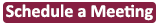
<style>
.page{position:relative;width:159px;height:25px;background:#861f41}
.page>*{position:absolute;margin:0}
.t1{font:18px "Calibri-Bold";color:#ffffff}
</style>
<div class="page">
<p class="t1" style="left:6px;top:4px;width:147px;height:17px">Schedule a Meeting</p>
</div>
